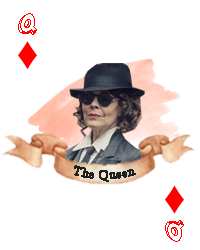
<style>
.page{position:relative;width:200px;height:250px;background:#ffffff}
.page>*{position:absolute;margin:0}
.t1{font:24.5px "PLAYFULALPHABET_demo";letter-spacing:0.04em;color:#ff0000;scale:1.03 1}
.t2{font:12px "TimesNewRomanPSMT";letter-spacing:0.04em;color:#202020}
</style>
<div class="page">
<p class="t1" style="left:18px;top:13px;width:19px;height:22px">Q</p>
<p class="t2" style="left:74px;top:165px;width:62px;height:17px">The Queen</p>
<p class="t1" style="left:165px;top:220px;width:19px;height:22px">Q</p>
</div>
